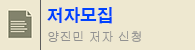
<style>
.page{position:relative;width:195px;height:50px;background:#eee8d0}
.page>*{position:absolute;margin:0}
.t1{font:16.7px "H2gtrE";color:#0042ff}
.t2{font:12.5px "Gulim";color:#919191}
</style>
<div class="page">
<p class="t1" style="left:47px;top:7px;width:65px;height:17px">저자모집</p>
<p class="t2" style="left:48px;top:31px;width:93px;height:11px">양진민 저자 신청</p>
</div>
